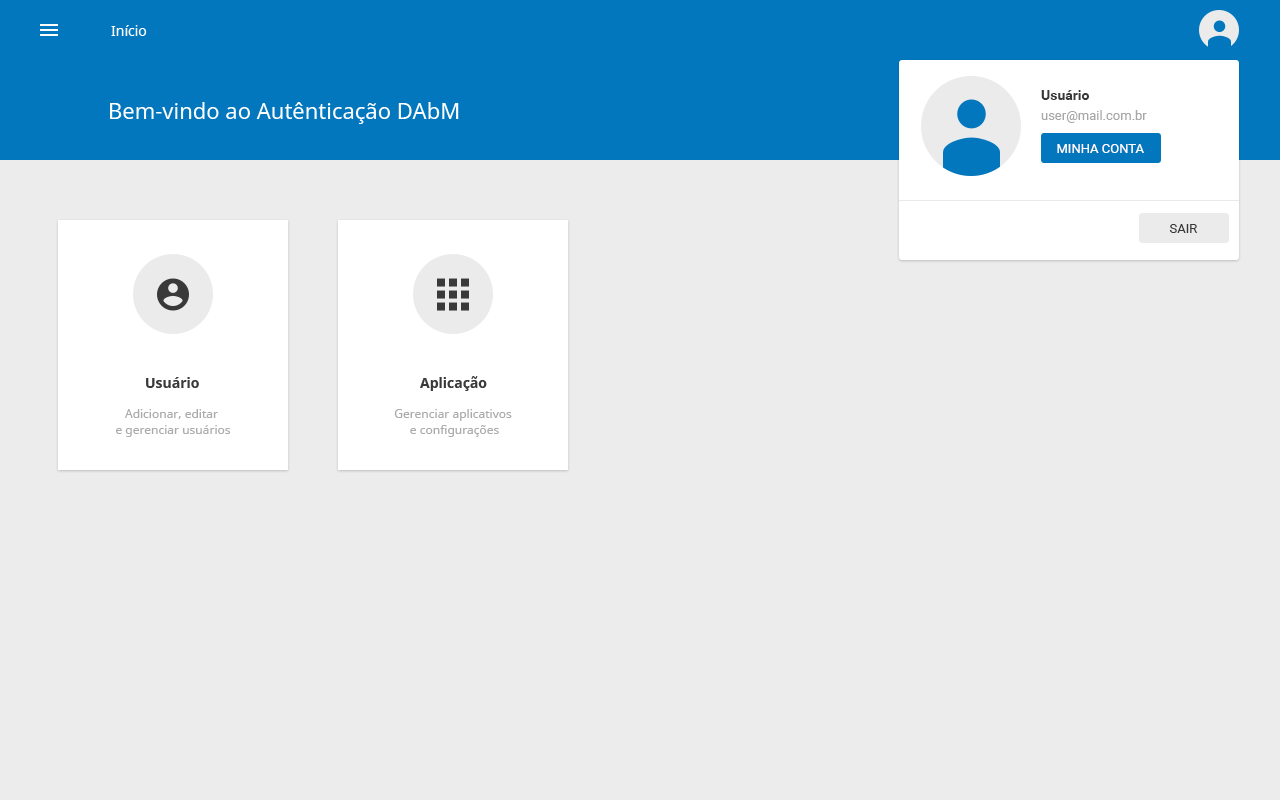
<style>
.page{position:relative;width:1280px;height:800px;background:#ececec}
.page>*{position:absolute;margin:0}
.t1{font:14px "NotoSans";color:#ffffff}
.t2{font:22px "NotoSans";color:#ffffff}
.t3{font:14px "Roboto-Bold";color:#393939}
.t4{font:13px "Roboto-Regular";color:#a7a7a7}
.t5{font:13px "Roboto-Regular";color:#ffffff;text-transform:uppercase}
.t6{font:13px "Roboto-Regular";color:#393939;text-transform:uppercase}
.t7{font:14px "NotoSans-Bold";color:#393939}
.t8{font:12px "NotoSans";color:#ababab}
</style>
<div class="page">
<p class="t1" style="left:111px;top:25px;width:36px;height:11px">Início</p>
<p class="t2" style="left:110px;top:102px;width:349px;height:22px">Bem-vindo ao Autênticação DAbM</p>
<p class="t3" style="left:1041px;top:90px;width:49px;height:10px">Usuário</p>
<p class="t4" style="left:1041px;top:110px;width:106px;height:13px">user@mail.com.br</p>
<p class="t5" style="left:1057px;top:144px;width:87px;height:9px">Minha conta</p>
<p class="t6" style="left:1169px;top:224px;width:29px;height:9px">SAIR</p>
<p class="t7" style="left:146px;top:377px;width:53px;height:11px">Usuário</p>
<p class="t7" style="left:420px;top:376px;width:67px;height:15px">Aplicação</p>
<p class="t8" style="left:116px;top:409px;width:115px;height:28px;text-align:center">Adicionar, editar <br>e gerenciar usuários</p>
<p class="t8" style="left:394px;top:409px;width:118px;height:28px;text-align:center">Gerenciar aplicativos<br> e configurações</p>
</div>
